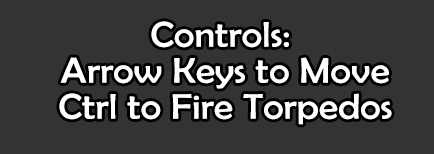
<style>
.page{position:relative;width:434px;height:154px;background:#333333}
.page>*{position:absolute;margin:0}
.t1{font:36px/36px "BerlinSansFB-Reg";color:#ffffff;scale:1.1 1}
</style>
<div class="page">
<p class="t1" style="left:59px;top:21px;width:333px;height:104px;text-align:center">Controls: <br>Arrow Keys to Move<br>Ctrl to Fire Torpedos</p>
</div>
